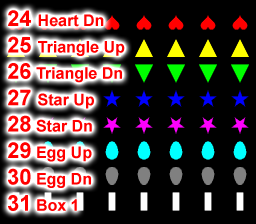
<style>
.page{position:relative;width:256px;height:224px;background:#000000}
.page>*{position:absolute;margin:0}
.t1{font:16px "Arial-BoldMT";color:#ff0000}
.t2{font:22px "Arial-BoldMT";color:#ff0000}
</style>
<div class="page">
<p class="t1" style="left:8px;top:10px;width:117px;height:201px"><span class="t2">24 </span>Heart Dn<br><span class="t2">25 </span>Triangle Up<br><span class="t2">26</span> Triangle Dn<br><span class="t2">27 </span>Star Up<br><span class="t2">28</span> Star Dn<br><span class="t2">29</span> Egg Up<br><span class="t2">30</span> Egg Dn<br><span class="t2">31</span> Box 1</p>
</div>
